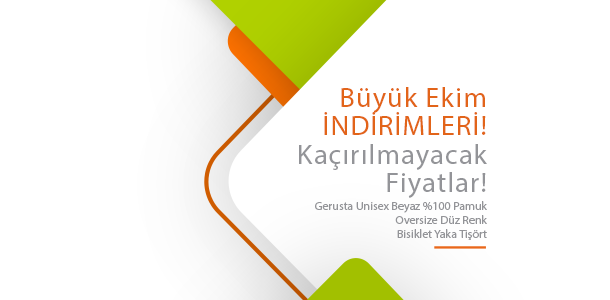
<style>
.page{position:relative;width:610px;height:300px;background:#ffffff}
.page>*{position:absolute;margin:0}
.t1{font:28.4px/28.4px "MyriadPro-Regular";letter-spacing:0.04em;color:#939498}
.t2{font:28.4px/28.4px "MyriadPro-Regular";letter-spacing:0.04em;color:#e26419}
.t3{font:11.9px "MyriadPro-Regular";color:#939498}
</style>
<div class="page">
<p class="t1" style="left:299px;top:87px;width:188px;height:111px;text-align:right"><span class="t2">Büyük Ekim<br>İNDİRİMLERİ!<br></span>   Kaçırılmayacak<br>Fiyatlar!</p>
<p class="t3" style="left:315px;top:201px;width:172px;height:39px;text-align:right">Gerusta Unisex Beyaz %100 Pamuk Oversize Düz Renk<br>Bisiklet Yaka Tişört</p>
</div>
